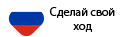
<style>
.page{position:relative;width:123px;height:37px;background:#ffffff}
.page>*{position:absolute;margin:0}
.t1{font:12px "MyriadPro-Regular";color:#000000}
</style>
<div class="page">
<p class="t1" style="left:50px;top:7px;width:65px;height:25px;text-align:center">Сделай свой<br>ход</p>
</div>
